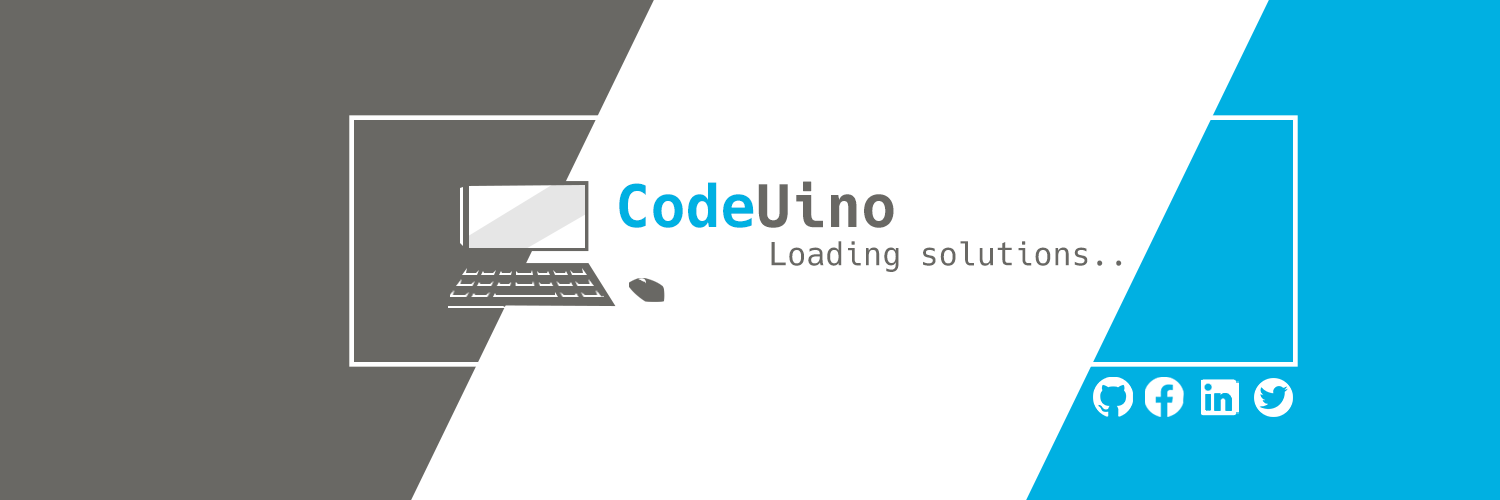
<style>
.page{position:relative;width:1500px;height:500px;background:#ffffff}
.page>*{position:absolute;margin:0}
.t1{font:58.3px "Hack-Bold";color:#00b0e2}
.t2{font:58.3px "Hack-Bold";color:#696864}
.t3{font:31.5px "Hack-Regular";color:#696864}
</style>
<div class="page">
<p class="t1" style="left:619px;top:181px;width:275px;height:47px">Code<span class="t2">Uino</span></p>
<p class="t3" style="left:771px;top:241px;width:351px;height:31px">Loading solutions..</p>
</div>
